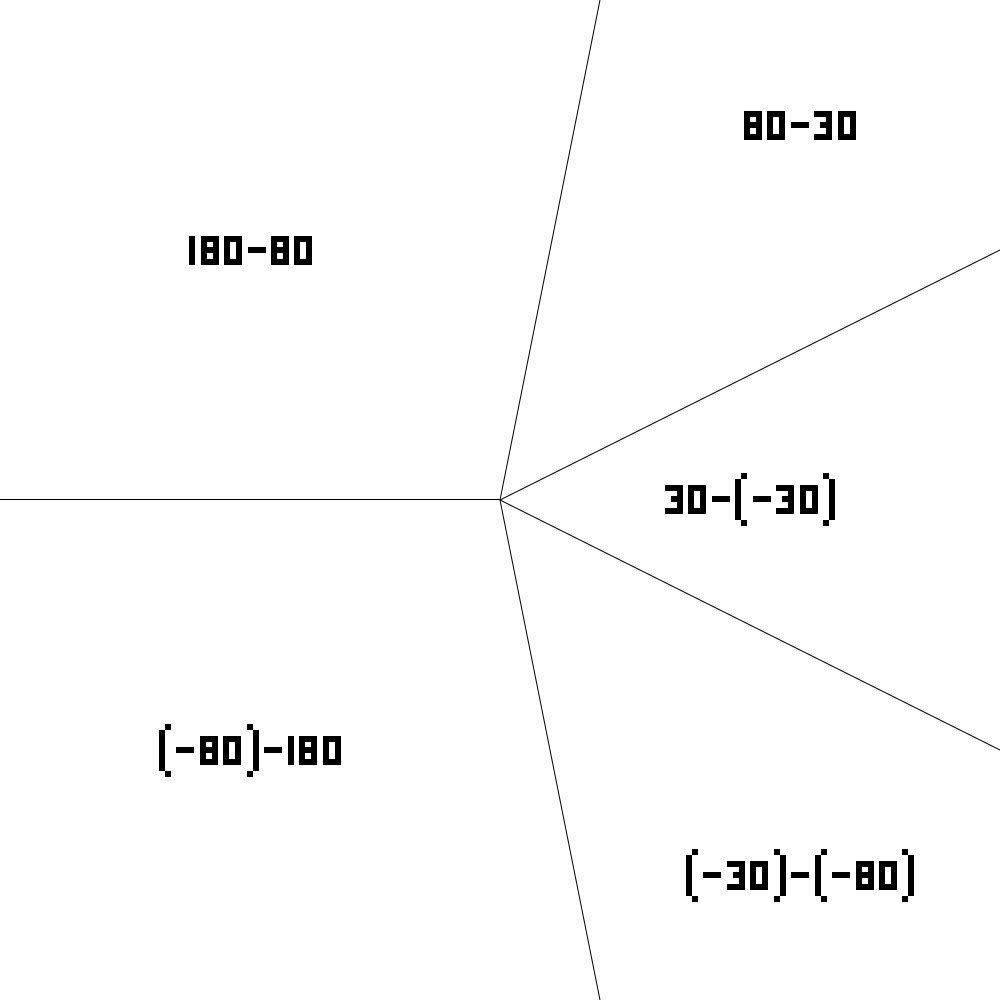
<style>
.page{position:relative;width:1000px;height:1000px;background:#ffffff}
.page>*{position:absolute;margin:0}
.t1{font:50px "Project33-Regular";color:#000000}
</style>
<div class="page">
<p class="t1" style="left:744px;top:111px;width:112px;height:29px">80-30</p>
<p class="t1" style="left:189px;top:236px;width:123px;height:29px">180-80</p>
<p class="t1" style="left:665px;top:473px;width:170px;height:53px">30-(-30)</p>
<p class="t1" style="left:159px;top:724px;width:182px;height:53px">(-80)-180</p>
<p class="t1" style="left:686px;top:849px;width:228px;height:53px">(-30)-(-80)</p>
</div>
